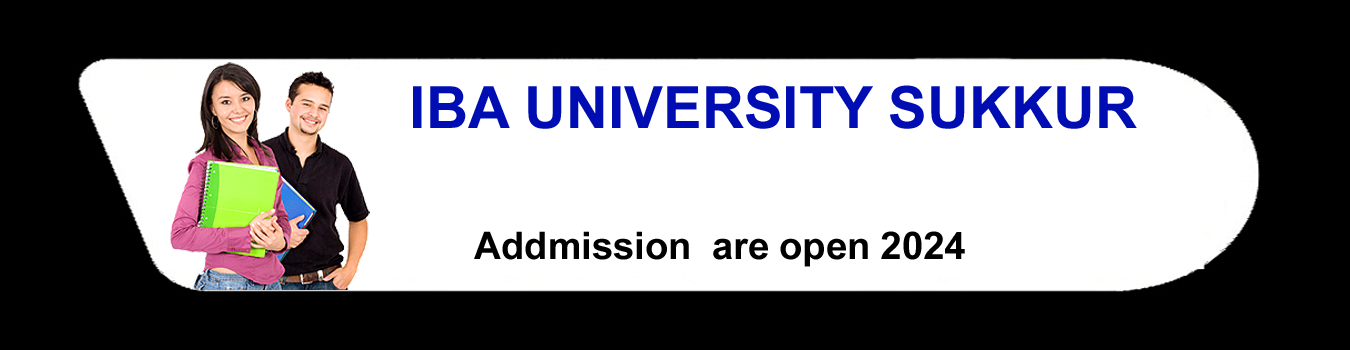
<style>
.page{position:relative;width:1350px;height:350px;background:#000000}
.page>*{position:absolute;margin:0}
.t1{font:58.2px "Arial-BoldMT";color:#000db2}
.t2{font:37.9px "Arial-BoldMT";color:#000000}
</style>
<div class="page">
<p class="t1" style="left:413px;top:85px;width:724px;height:44px">IBA UNIVERSITY SUKKUR</p>
<p class="t2" style="left:474px;top:231px;width:491px;height:36px">Addmission  are open 2024</p>
</div>
